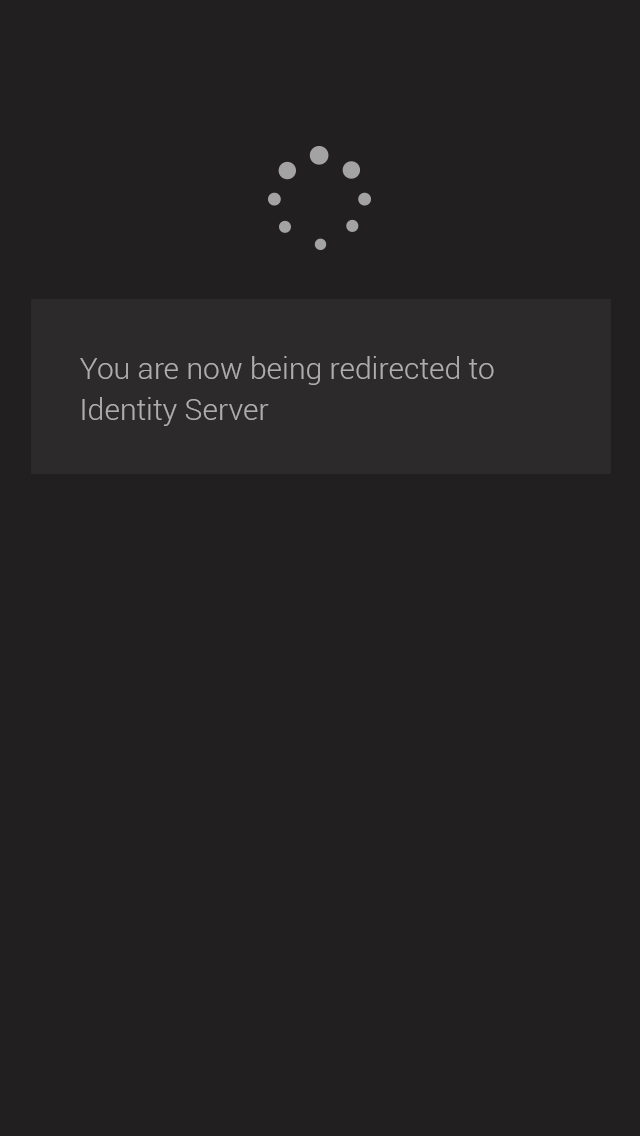
<style>
.page{position:relative;width:640px;height:1136px;background:#211f1f}
.page>*{position:absolute;margin:0}
.t1{font:30px/41px "Roboto-Light";color:#adadad}
</style>
<div class="page">
<p class="t1" style="left:80px;top:356px;width:414px;height:70px">You are now being redirected to Identity Server</p>
</div>
